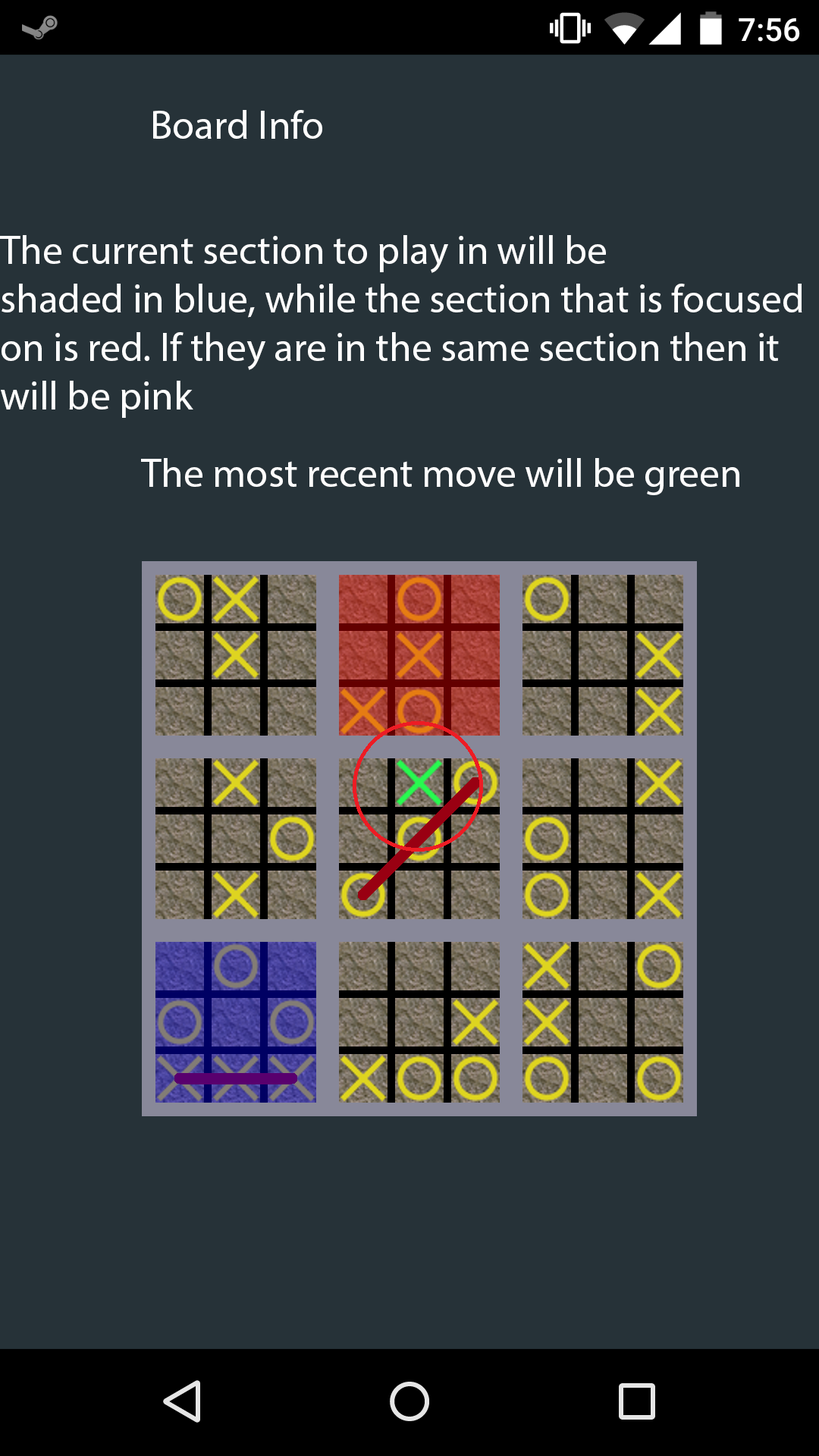
<style>
.page{position:relative;width:819px;height:1456px;background:#263238}
.page>*{position:absolute;margin:0}
.t1{font:40.4px "MyriadPro-Regular";color:#fefefe}
</style>
<div class="page">
<p class="t1" style="left:153px;top:110px;width:169px;height:29px">Board Info</p>
<p class="t1" style="left:0px;top:235px;width:802px;height:183px">The current section to play in will be <br>shaded in blue, while the section that is focused<br>on is red. If they are in the same section then it <br>will be pink</p>
<p class="t1" style="left:141px;top:458px;width:598px;height:37px">The most recent move will be green</p>
</div>
